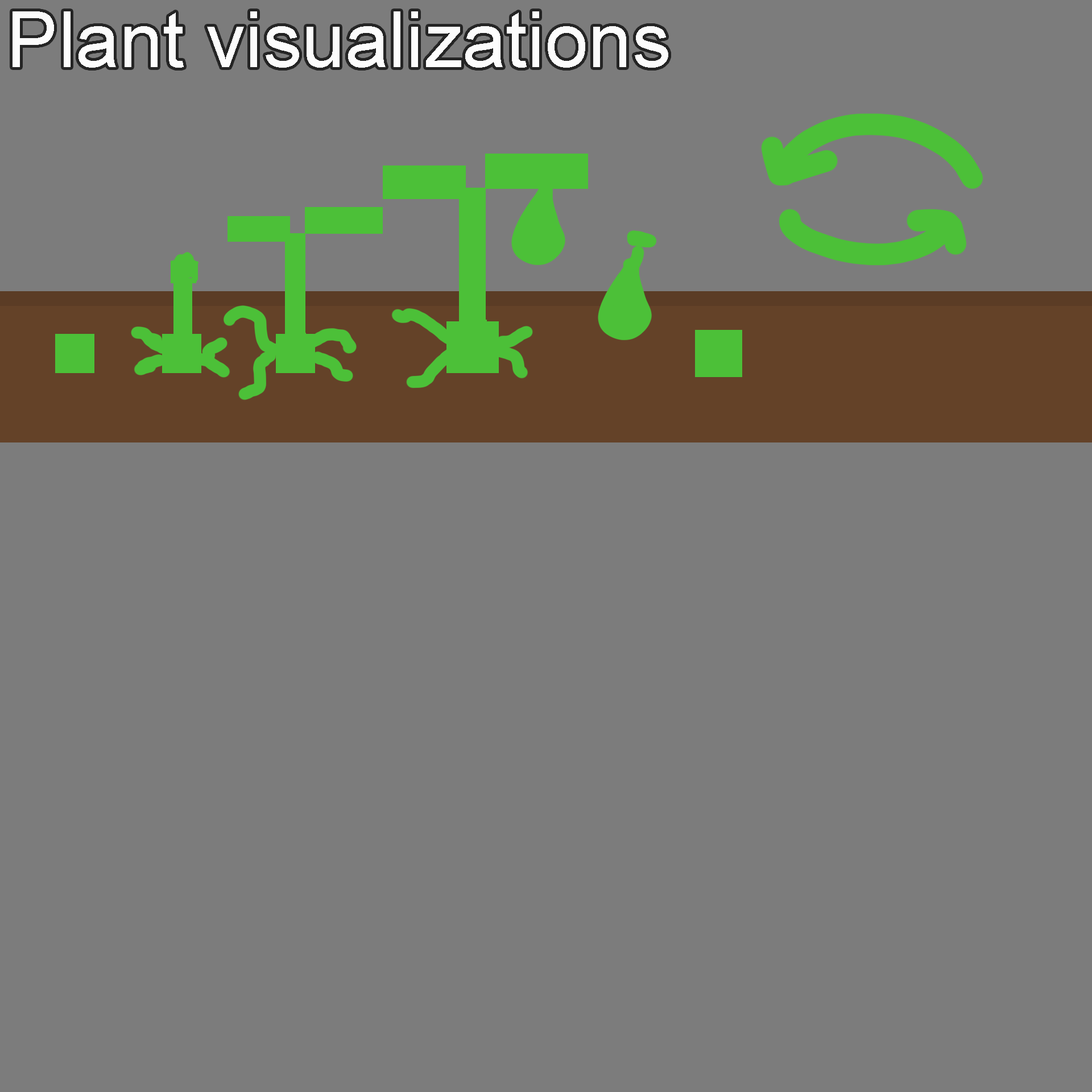
<style>
.page{position:relative;width:1092px;height:1092px;background:#7c7c7c}
.page>*{position:absolute;margin:0}
.t1{font:78.1px "ArialMT";color:#fcfcfc}
</style>
<div class="page">
<p class="t1" style="left:13px;top:11px;width:655px;height:57px">Plant visualizations</p>
</div>
